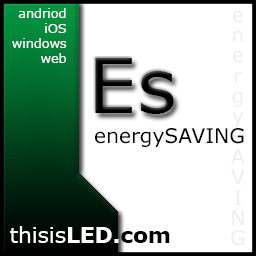
<style>
.page{position:relative;width:256px;height:256px;background:#ffffff}
.page>*{position:absolute;margin:0}
.t1{font:12.7px "Verdana";color:#ffffff}
.t2{font:76.2px "Verdana";color:#000000}
.t3{font:20.3px "Verdana";color:#000000}
.t4{font:21.6px "Verdana";color:#ffffff}
.t5{font:21.6px "Verdana-Bold";color:#ffffff}
.t6{font:21.6px "Verdana-Bold";color:#000000}
</style>
<div class="page">
<p class="t1" style="left:12px;top:8px;width:55px;height:55px;text-align:right">andriod<br>iOS<br>windows<br>web</p>
<p class="t2" style="left:95px;top:58px;width:79px;height:56px">Es</p>
<p class="t3" style="left:95px;top:128px;width:149px;height:19px">energySAVING</p>
<p class="t4" style="left:10px;top:226px;width:160px;height:17px">thisis<span class="t5">LED.</span><span class="t6">com</span></p>
</div>
